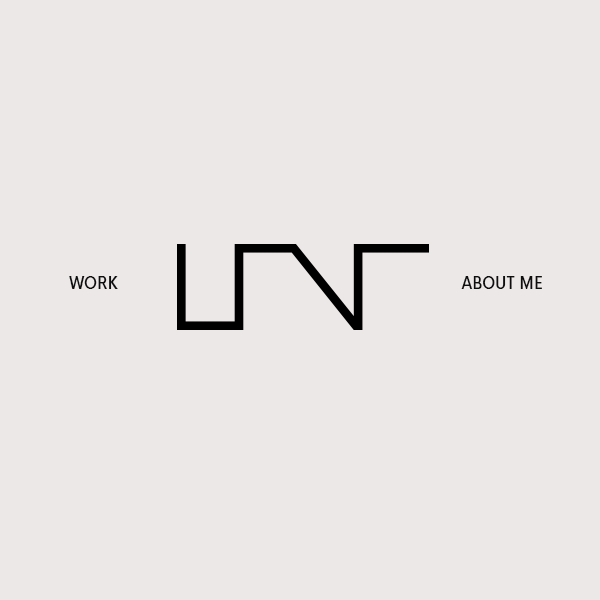
<style>
.page{position:relative;width:600px;height:600px;background:#ede8e8}
.page>*{position:absolute;margin:0}
.t1{font:16.1px "HKNova-MediumNarrow";color:#0e0e0e}
.t2{font:16px "HKNova-MediumNarrow";color:#0e0e0e}
</style>
<div class="page">
<p class="t1" style="left:69px;top:276px;width:49px;height:13px">WORK</p>
<p class="t2" style="left:461px;top:276px;width:81px;height:13px">ABOUT ME</p>
</div>
